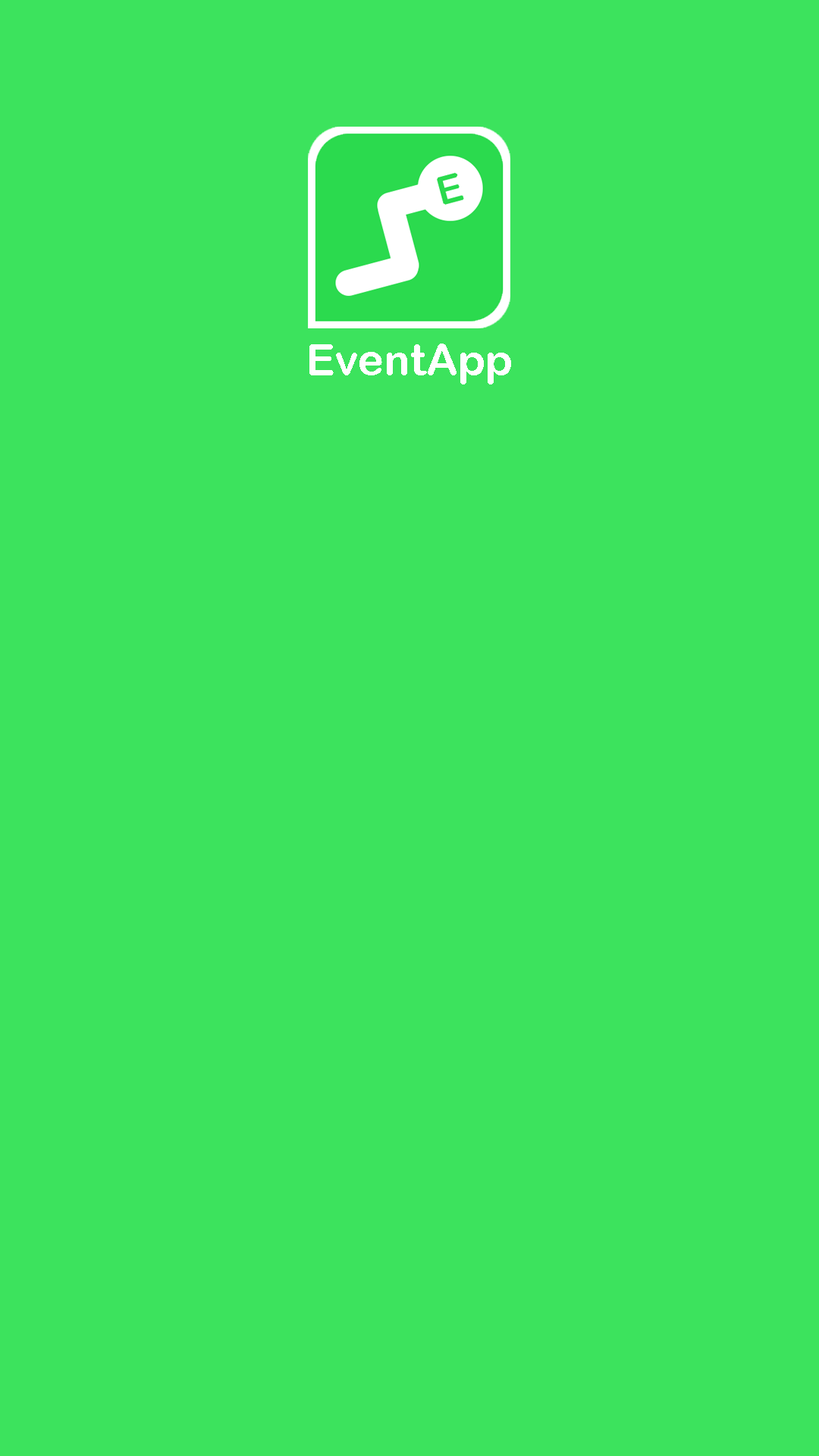
<style>
.page{position:relative;width:819px;height:1456px;background:#3ce35d}
.page>*{position:absolute;margin:0}
.t1{font:44px "ArialRoundedMTBold";color:#ffffff}
</style>
<div class="page">
<p class="t1" style="left:309px;top:344px;width:202px;height:40px">EventApp</p>
</div>
